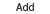
<style>
.page{position:relative;width:50px;height:14px;background:#ffffff}
.page>*{position:absolute;margin:0}
.t1{font:10px "KozGoPr6N-Regular";color:#333333}
</style>
<div class="page">
<p class="t1" style="left:16px;top:3px;width:18px;height:8px">Add</p>
</div>
